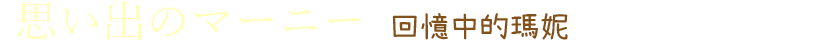
<style>
.page{position:relative;width:823px;height:42px;background:#ffffff}
.page>*{position:absolute;margin:0}
.t1{font:44px "YuMincho-Regular";color:#ffffbb}
.t2{font:30px "SetoFont";color:#81511c}
</style>
<div class="page">
<p class="t1" style="left:17px;top:1px;width:551px;height:39px">思い出のマーニー  <span class="t2">回憶中的瑪妮</span></p>
</div>
